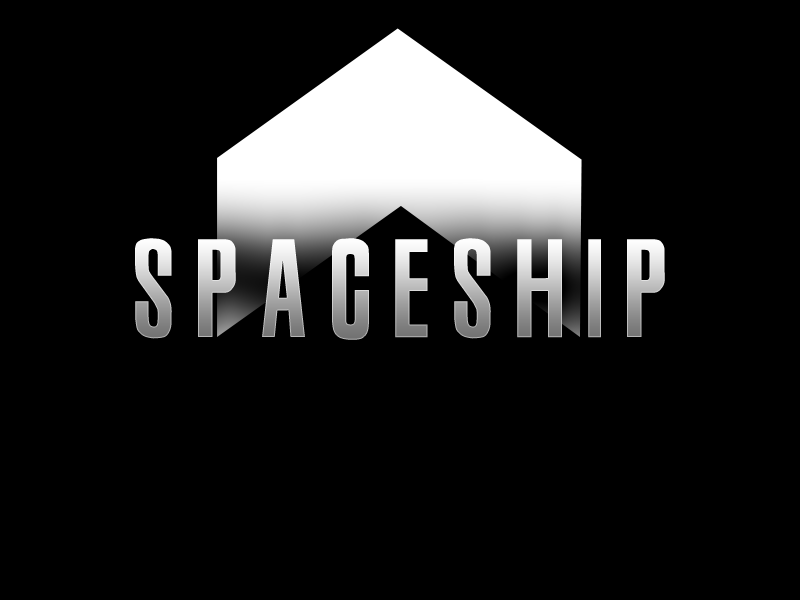
<style>
.page{position:relative;width:800px;height:600px;background:#000000}
.page>*{position:absolute;margin:0}
.t1{font:111.6px "Metal-Gear-Solid-2";letter-spacing:0.2em}
</style>
<div class="page">
<p class="t1" style="left:135px;top:238px;width:530px;height:102px">Spaceship</p>
</div>
